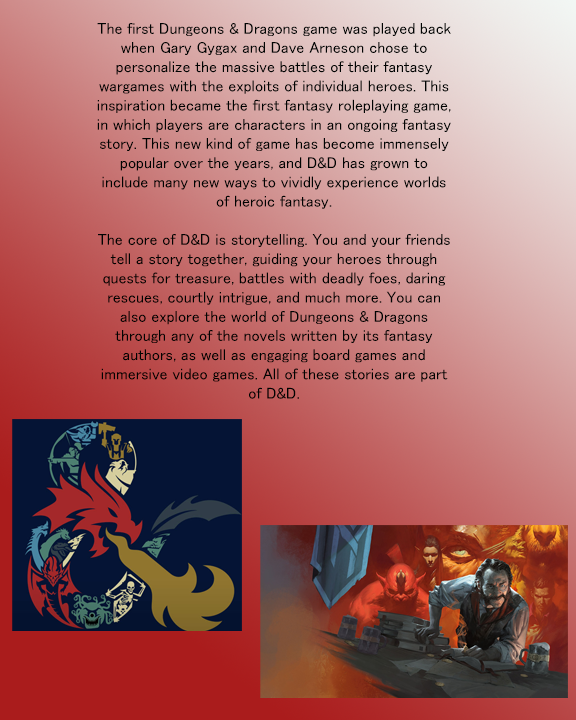
<style>
.page{position:relative;width:576px;height:720px}
.page>*{position:absolute;margin:0}
.t1{font:16px "MS-PGothic";color:#000302}
</style>
<div class="page">
<p class="t1" style="left:97px;top:23px;width:354px;height:376px;text-align:center">The first Dungeons &amp; Dragons game was played back when Gary Gygax and Dave Arneson chose to personalize the massive battles of their fantasy wargames with the exploits of individual heroes. This inspiration became the first fantasy roleplaying game, in which players are characters in an ongoing fantasy story. This new kind of game has become immensely popular over the years, and D&amp;D has grown to include many new ways to vividly experience worlds of heroic fantasy.<br><br>The core of D&amp;D is storytelling. You and your friends tell a story together, guiding your heroes through quests for treasure, battles with deadly foes, daring rescues, courtly intrigue, and much more. You can also explore the world of Dungeons &amp; Dragons through any of the novels written by its fantasy authors, as well as engaging board games and immersive video games. All of these stories are part of D&amp;D.</p>
</div>
